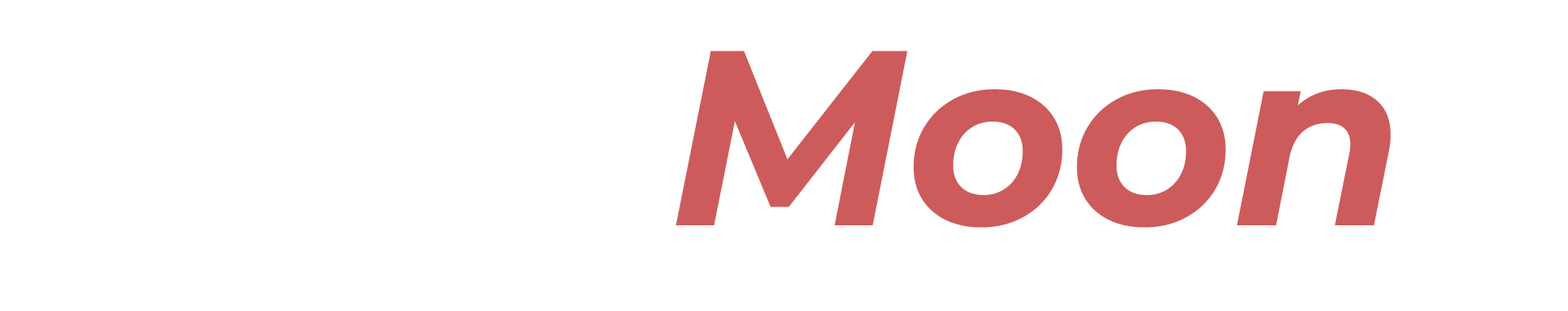
<style>
.page{position:relative;width:1568px;height:311px;background:#ffffff}
.page>*{position:absolute;margin:0}
.t1{font:249.1px "Montserrat-BoldItalic";color:#cd5b5b}
.t2{font:249.1px "Montserrat-BoldItalic";color:#ffffff}
</style>
<div class="page">
<p class="t1" style="left:163px;top:40px;width:1228px;height:188px"><span class="t2">Red</span>Moon</p>
</div>
